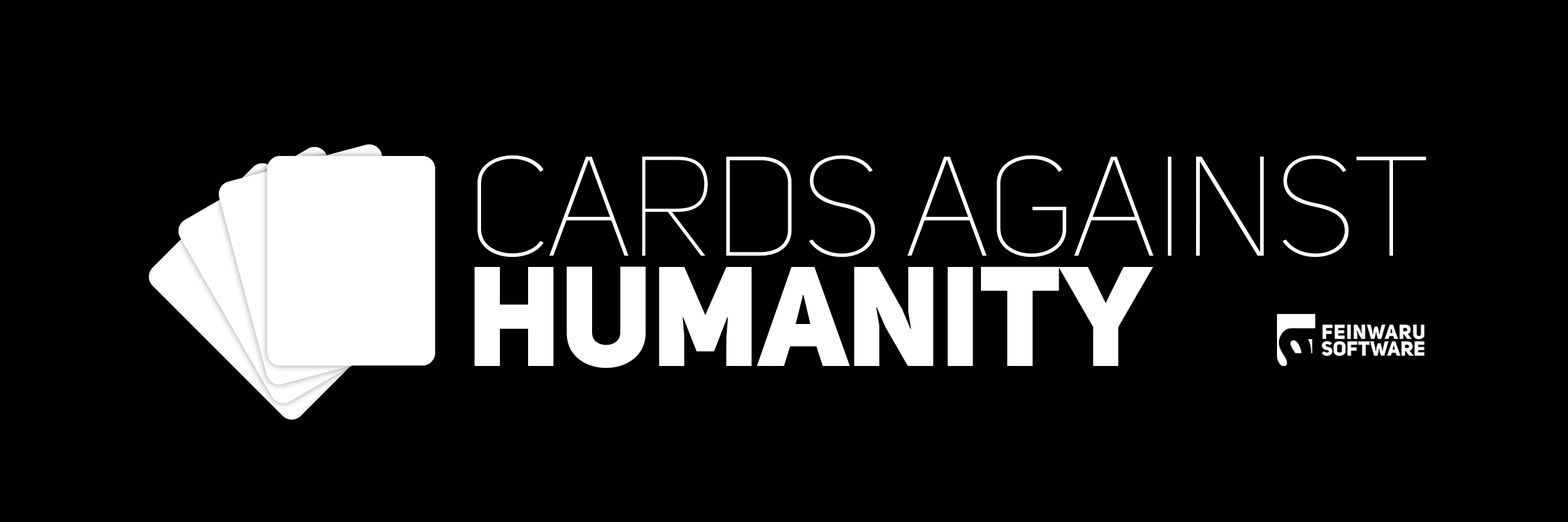
<style>
.page{position:relative;width:1568px;height:522px;background:#000000}
.page>*{position:absolute;margin:0}
.t1{font:139.9px/110.2px "UniSansThinCAPS";letter-spacing:-0.01em;color:#ffffff}
.t2{font:139.9px/110.2px "UniSansHeavyCAPS";letter-spacing:-0.01em;color:#ffffff}
</style>
<div class="page">
<p class="t1" style="left:474px;top:156px;width:952px;height:212px">CARDS AGAINST<br><span class="t2">HUMANITY</span></p>
</div>
